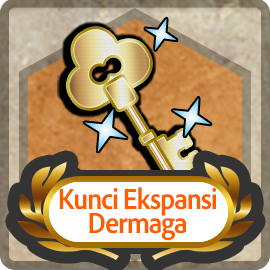
<style>
.page{position:relative;width:270px;height:270px}
.page>*{position:absolute;margin:0}
.t1{font:30px/24px "AdobeClean-Bold";letter-spacing:-0.04em;color:#ff5d00;scale:0.9 1}
</style>
<div class="page">
<p class="t1" style="left:59px;top:187px;width:157px;height:54px;text-align:center">Kunci Ekspansi<br>Dermaga</p>
</div>
